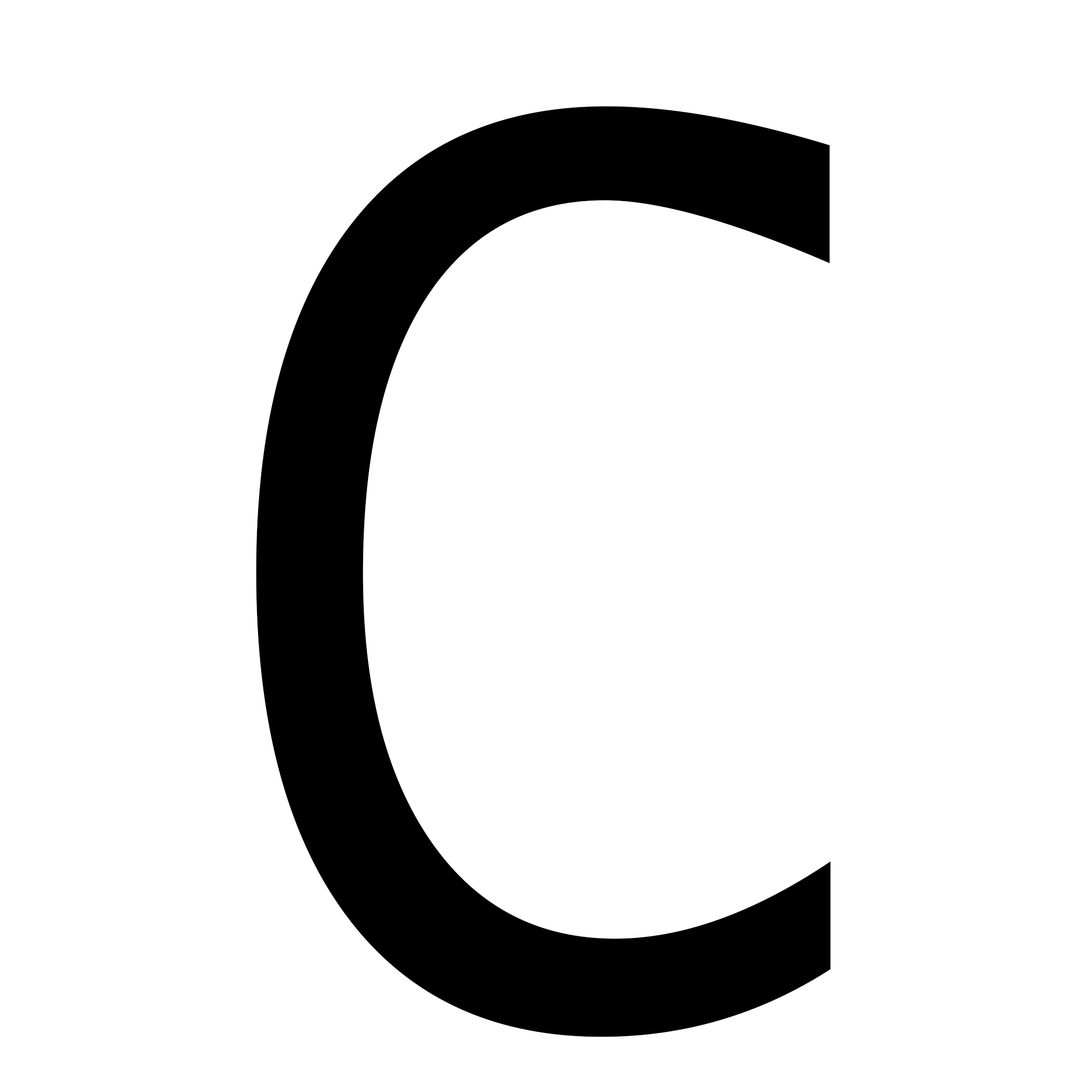
<style>
.page{position:relative;width:1092px;height:1092px;background:#ffffff}
.page>*{position:absolute;margin:0}
.t1{font:1226.4px "LucidaGrande";color:#000000;scale:0.8 1}
</style>
<div class="page">
<p class="t1" style="left:256px;top:106px;width:575px;height:931px">C</p>
</div>
